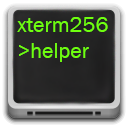
<style>
.page{position:relative;width:128px;height:128px}
.page>*{position:absolute;margin:0}
.t1{font:22px "FranklinGothic-Book";color:#6fff0f}
</style>
<div class="page">
<p class="t1" style="left:17px;top:17px;width:91px;height:45px">xterm256      &gt;helper</p>
</div>
